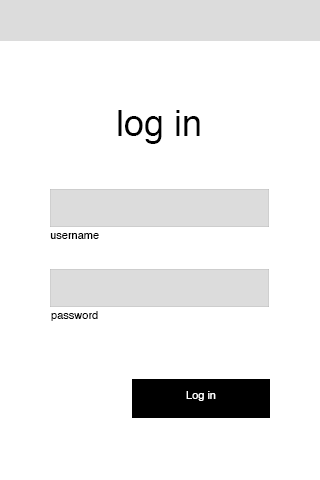
<style>
.page{position:relative;width:320px;height:480px;background:#ffffff}
.page>*{position:absolute;margin:0}
.t1{font:36px "Helvetica";color:#000000}
.t2{font:11px "Helvetica";color:#000000}
.t3{font:11px "Helvetica";color:#ffffff}
</style>
<div class="page">
<p class="t1" style="left:118px;top:110px;width:82px;height:34px">log in</p>
<p class="t2" style="left:50px;top:233px;width:49px;height:6px">username</p>
<p class="t2" style="left:51px;top:311px;width:47px;height:10px">password</p>
<p class="t3" style="left:186px;top:391px;width:30px;height:10px">Log in</p>
</div>
